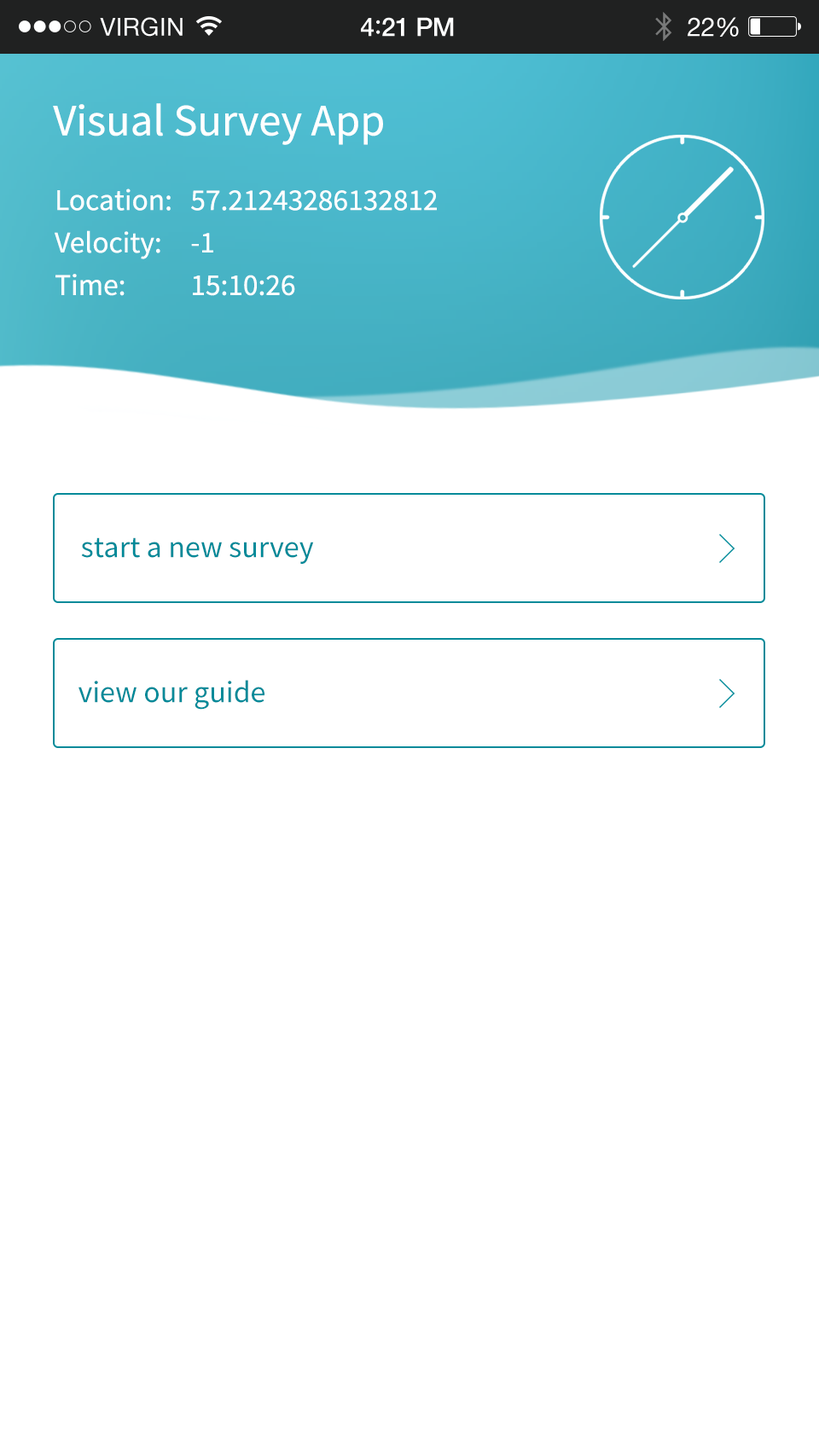
<style>
.page{position:relative;width:819px;height:1456px;background:#ffffff}
.page>*{position:absolute;margin:0}
.t1{font:44.7px "SourceSansPro-Regular";color:#ffffff}
.t2{font:30.2px/42.5px "SourceSansPro-Regular";color:#ffffff}
.t3{font:30.7px "SourceSansPro-Regular";color:#008a99}
</style>
<div class="page">
<p class="t1" style="left:53px;top:103px;width:330px;height:42px">Visual Survey App</p>
<p class="t2" style="left:55px;top:189px;width:382px;height:107px">Location:  57.21243286132812<br>Velocity:  -1<br>Time:   15:10:26</p>
<p class="t3" style="left:81px;top:537px;width:233px;height:27px">start a new survey</p>
<p class="t3" style="left:78px;top:680px;width:186px;height:30px">view our guide</p>
</div>
